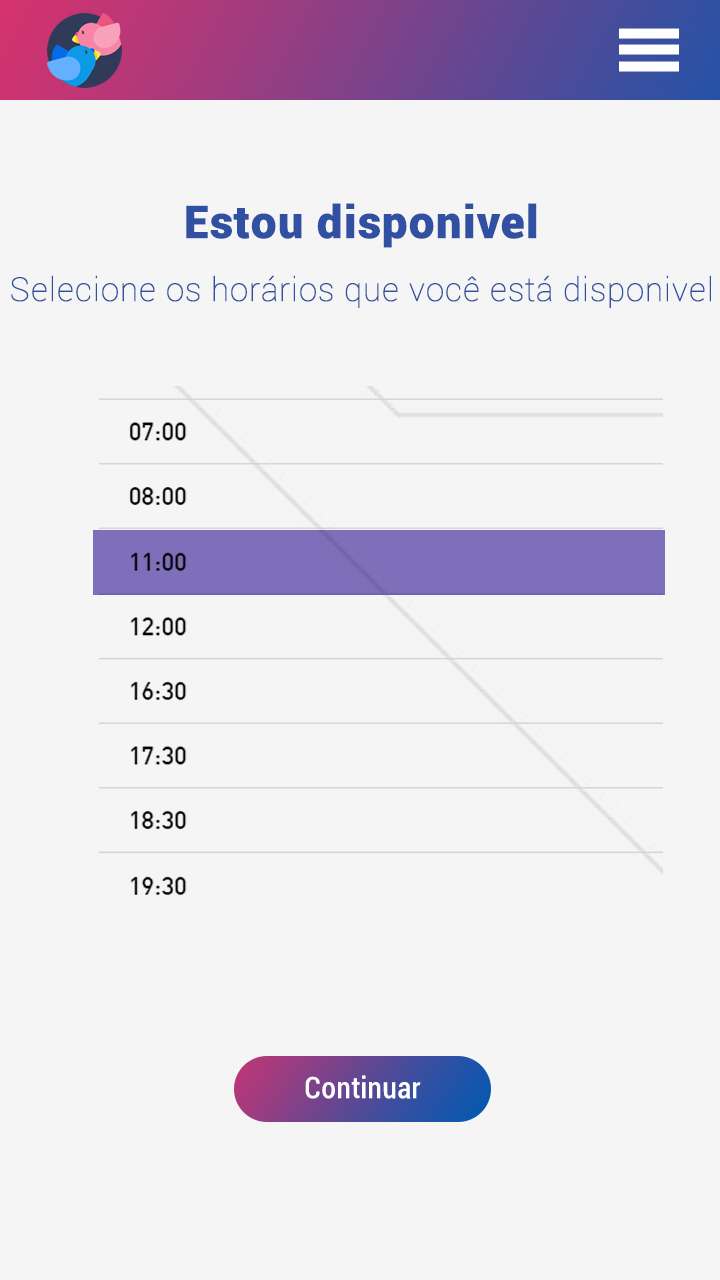
<style>
.page{position:relative;width:720px;height:1280px;background:#f5f5f5}
.page>*{position:absolute;margin:0}
.t1{font:45px "Roboto-Black";color:#3150a1;font-weight:bold}
.t2{font:33px "Roboto-Thin";color:#3150a0;font-weight:bold}
.t3{font:29px "Roboto-Condensed";color:#ffffff;font-weight:bold}
</style>
<div class="page">
<p class="t1" style="left:186px;top:203px;width:351px;height:45px">Estou disponivel</p>
<p class="t2" style="left:11px;top:275px;width:700px;height:33px">Selecione os horários que você está disponivel</p>
<p class="t3" style="left:305px;top:1075px;width:116px;height:24px">Continuar</p>
</div>
